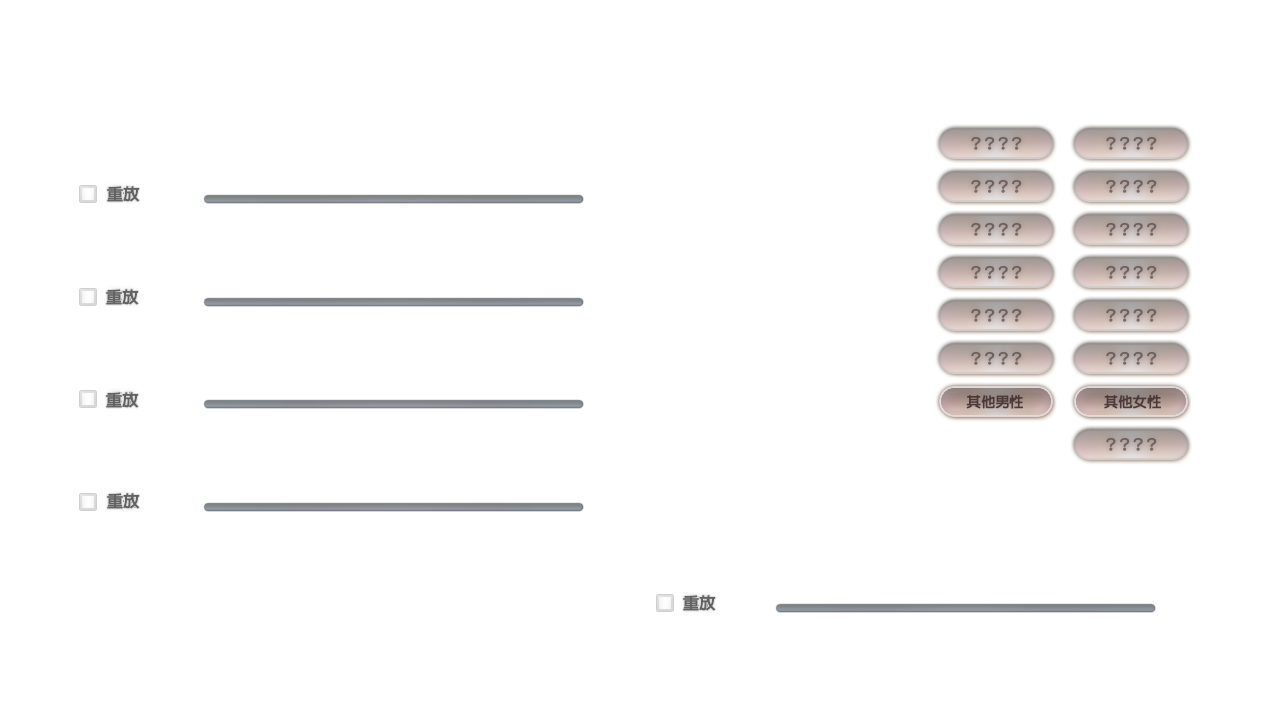
<style>
.page{position:relative;width:1280px;height:720px;background:#ffffff}
.page>*{position:absolute;margin:0}
.t1{font:16px "AdobeFanHeitiStd-Bold";color:#626262;font-weight:bold}
.t2{font:14px "AdobeFanHeitiStd-Bold";color:#4c3a3a;font-weight:bold}
.t3{font:14px "AdobeFanHeitiStd-Bold";color:#4d3b3b;font-weight:bold}
</style>
<div class="page">
<p class="t1" style="left:107px;top:186px;width:33px;height:16px">重放</p>
<p class="t1" style="left:106px;top:289px;width:33px;height:16px">重放</p>
<p class="t1" style="left:106px;top:392px;width:33px;height:16px">重放</p>
<p class="t2" style="left:966px;top:394px;width:57px;height:15px">其他男性</p>
<p class="t3" style="left:1104px;top:394px;width:57px;height:15px">其他女性</p>
<p class="t1" style="left:107px;top:493px;width:33px;height:16px">重放</p>
<p class="t1" style="left:683px;top:595px;width:33px;height:16px">重放</p>
</div>
